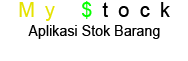
<style>
.page{position:relative;width:188px;height:61px;background:#ffffff}
.page>*{position:absolute;margin:0}
.t1{font:20.4px "ArialMT";letter-spacing:0.53em;color:#000000;scale:0.97 1}
.t2{font:20.4px "ArialMT";letter-spacing:0.53em;color:#e5e200;scale:0.97 1}
.t3{font:20.4px "ArialMT";letter-spacing:0.53em;color:#06ff00;scale:0.97 1}
.t4{font:15px "ArialMT";color:#000000;scale:0.95 1}
</style>
<div class="page">
<p class="t1" style="left:19px;top:1px;width:151px;height:20px"><span class="t2">My </span><span class="t3">$</span>tock</p>
<p class="t4" style="left:28px;top:25px;width:132px;height:14px">Aplikasi Stok Barang</p>
</div>
